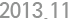
<style>
.page{position:relative;width:72px;height:19px;background:#ffffff}
.page>*{position:absolute;margin:0}
.t1{font:22px "SeoulNamsanB";color:#929392}
</style>
<div class="page">
<p class="t1" style="left:0px;top:2px;width:68px;height:19px">2013.11</p>
</div>
